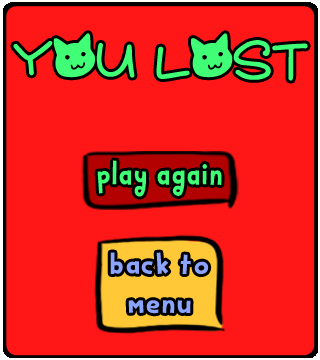
<style>
.page{position:relative;width:320px;height:360px;background:#ff1717}
.page>*{position:absolute;margin:0}
.t1{font:53px "QuietMeows";color:#40ff76}
.t2{font:37px "BakeappleDEMO-Regular";color:#40ff76;scale:0.86 1}
.t3{font:32.4px "BakeappleDEMO-Regular";color:#8ba5ff;scale:1.05 1}
</style>
<div class="page">
<p class="t1" style="left:13px;top:33px;width:295px;height:48px">you lost</p>
<p class="t2" style="left:97px;top:160px;width:125px;height:37px">play again</p>
<p class="t3" style="left:110px;top:252px;width:99px;height:62px;text-align:center">back to <br>menu</p>
</div>
